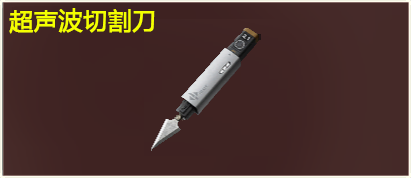
<style>
.page{position:relative;width:411px;height:178px}
.page>*{position:absolute;margin:0}
.t1{font:24px "MicrosoftYaHeiUI";color:#f4ff00;font-weight:bold}
</style>
<div class="page">
<p class="t1" style="left:9px;top:8px;width:146px;height:26px">超声波切割刀</p>
</div>
